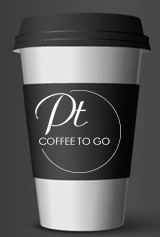
<style>
.page{position:relative;width:160px;height:237px}
.page>*{position:absolute;margin:0}
.t1{font:45.6px "Ariston-Normal";letter-spacing:-0.075em;color:#ffffff}
.t2{font:9.7px "CenturyGothic";letter-spacing:0.005em;text-transform:uppercase}
</style>
<div class="page">
<p class="t1" style="left:35px;top:93px;width:53px;height:42px">Pt</p>
<p class="t2" style="left:39px;top:137px;width:71px;height:8px">coffee to go</p>
</div>
